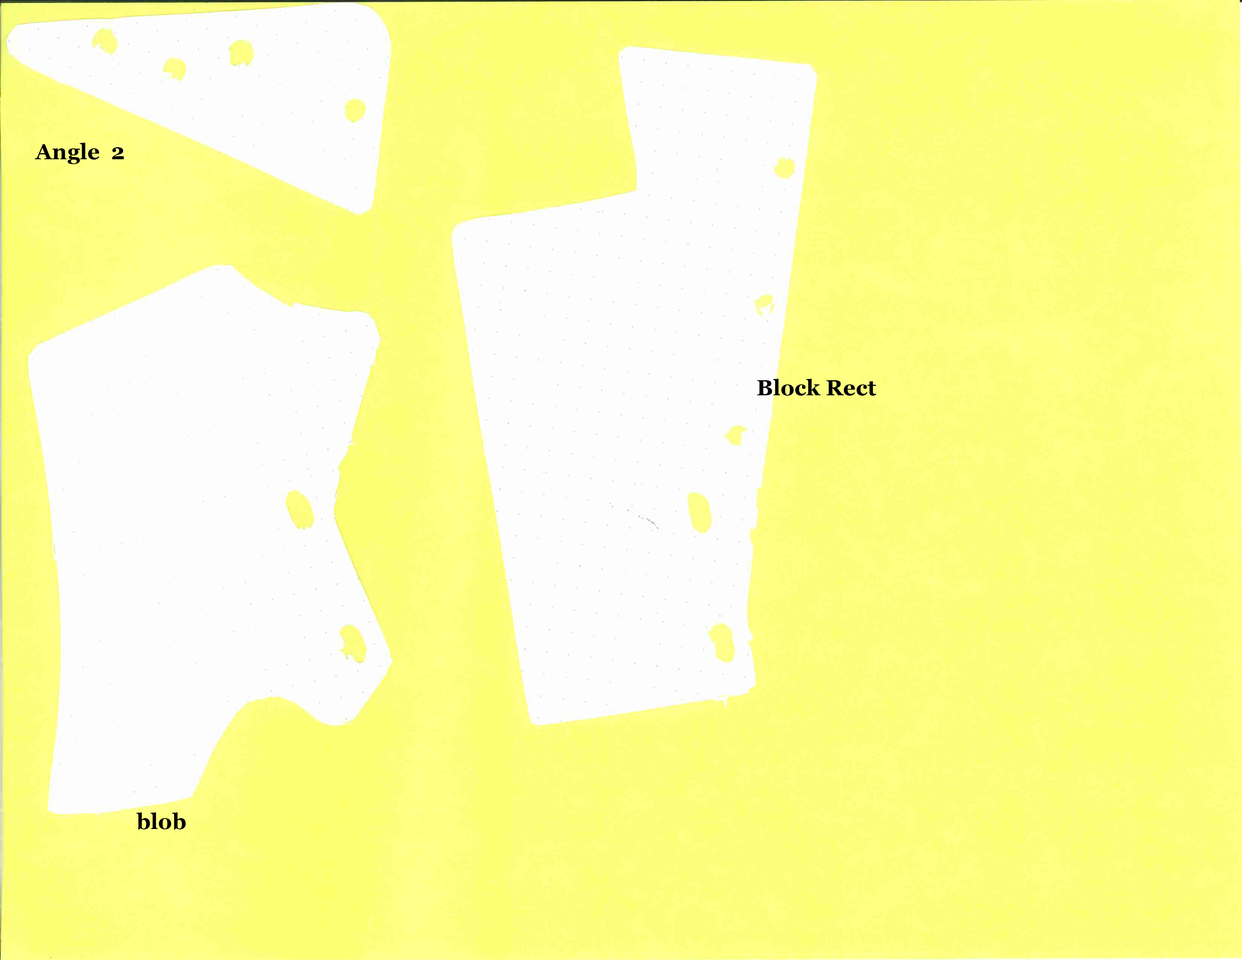
<style>
.page{position:relative;width:1242px;height:960px;background:#fdfd7c}
.page>*{position:absolute;margin:0}
.t1{font:22px "Georgia-Bold";color:#000000}
</style>
<div class="page">
<p class="t1" style="left:35px;top:143px;width:89px;height:21px">Angle  2</p>
<p class="t1" style="left:757px;top:379px;width:119px;height:17px">Block Rect</p>
<p class="t1" style="left:136px;top:812px;width:50px;height:18px">blob</p>
</div>
